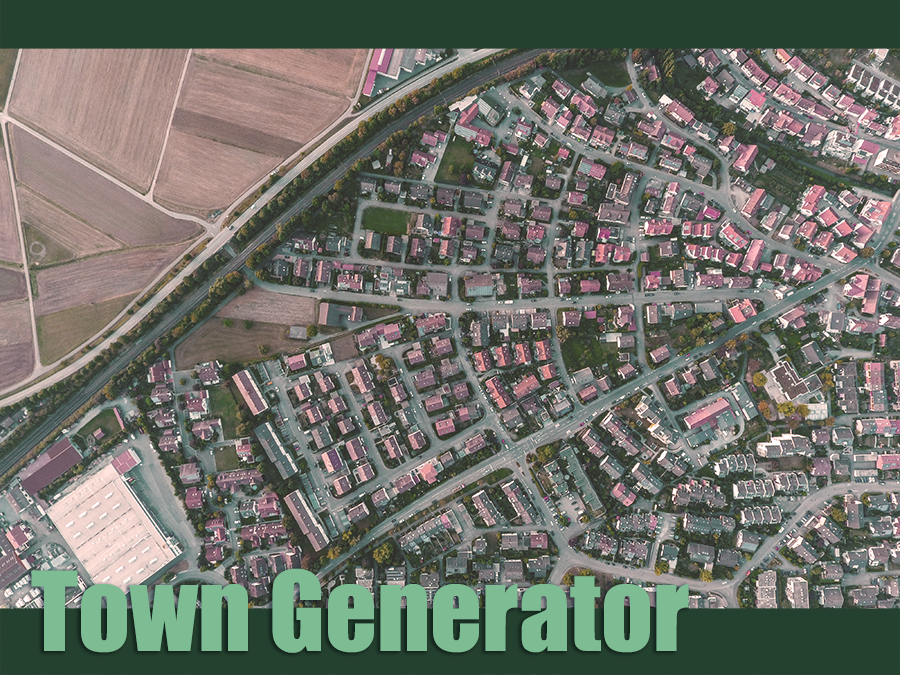
<style>
.page{position:relative;width:900px;height:675px}
.page>*{position:absolute;margin:0}
.t1{font:101.8px "Impact";color:#7ebd94}
</style>
<div class="page">
<p class="t1" style="left:31px;top:568px;width:658px;height:85px">Town Generator</p>
</div>
